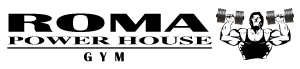
<style>
.page{position:relative;width:300px;height:69px;background:#ffffff}
.page>*{position:absolute;margin:0}
.t1{font:27px "BritannicBold";letter-spacing:-0.01em;color:#000000;scale:3 1}
.t2{font:11.2px "Times-Bold";letter-spacing:-0.01em;color:#000000;scale:2.46 1}
.t3{font:13.5px "BritannicBold";letter-spacing:-0.01em;color:#000000}
</style>
<div class="page">
<p class="t1" style="left:8px;top:13px;width:201px;height:19px">ROMA</p>
<p class="t2" style="left:7px;top:36px;width:205px;height:9px">POWER HOUSE</p>
<p class="t3" style="left:84px;top:52px;width:40px;height:10px">G  Y  M</p>
</div>
